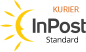
<style>
.page{position:relative;width:86px;height:52px;background:#ffffff}
.page>*{position:absolute;margin:0}
.t1{font:8px "OpenSans";letter-spacing:-0.025em}
</style>
<div class="page">
<p class="t1" style="left:53px;top:6px;width:26px;height:7px">KURIER</p>
<p class="t1" style="left:46px;top:36px;width:32px;height:7px">Standard</p>
</div>
